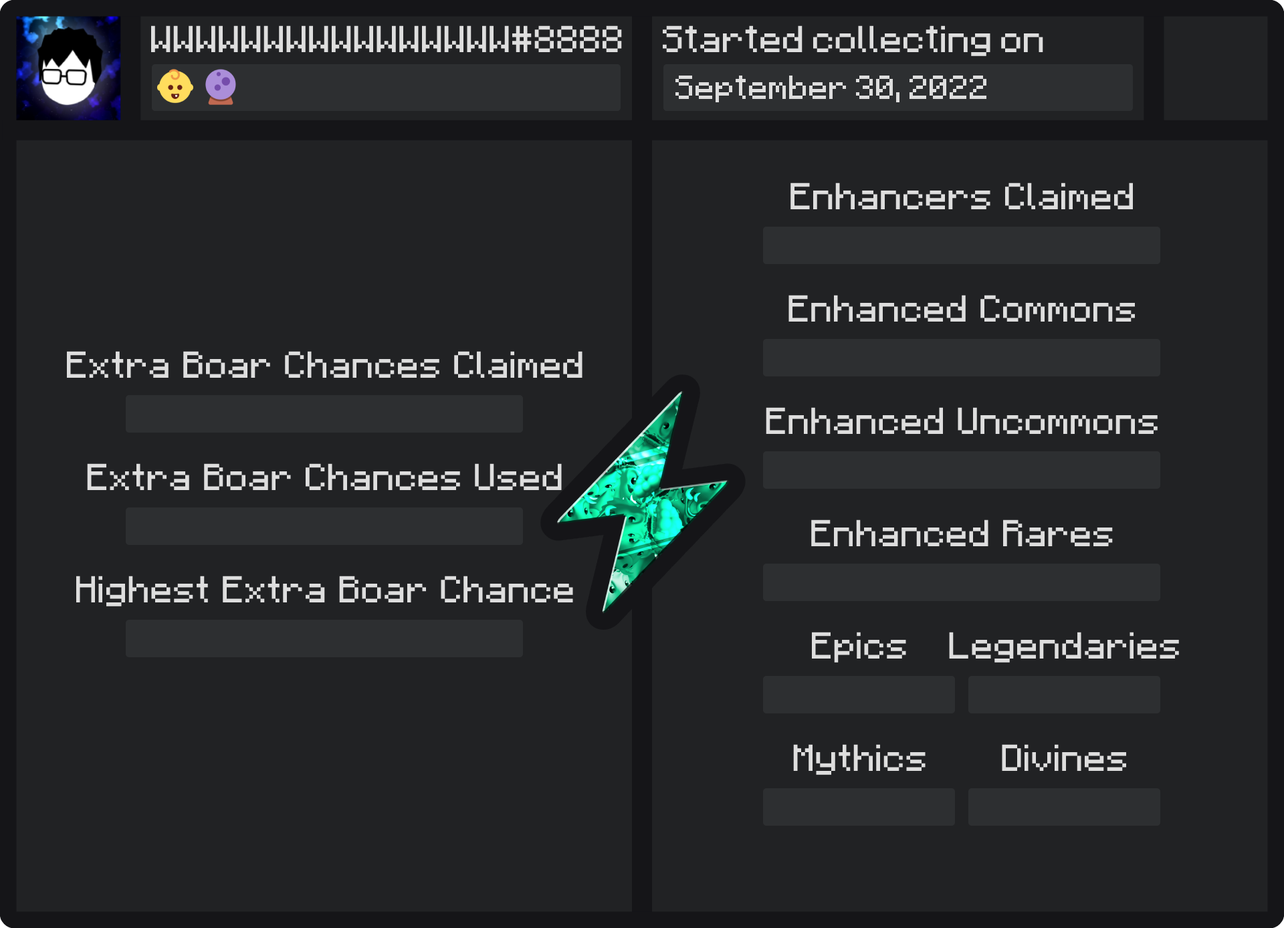
<style>
.page{position:relative;width:1284px;height:928px;background:#212224}
.page>*{position:absolute;margin:0}
.t1{font:30.1px "Minecraft";color:#dedede}
.t2{font:26.8px "Minecraft";color:#dedede}
.t3{font:30.1px "F77-Minecraft";color:#dedede}
</style>
<div class="page">
<p class="t1" style="left:151px;top:25px;width:471px;height:28px">WWWWWWWWWWWWWWWW#8888</p>
<p class="t1" style="left:663px;top:25px;width:381px;height:31px">Started collecting on</p>
<p class="t2" style="left:676px;top:76px;width:311px;height:26px">September 30, 2022</p>
<p class="t3" style="left:791px;top:183px;width:343px;height:27px">Enhancers Claimed</p>
<p class="t3" style="left:789px;top:295px;width:346px;height:27px">Enhanced Commons</p>
<p class="t3" style="left:66px;top:351px;width:517px;height:28px">Extra Boar Chances Claimed</p>
<p class="t3" style="left:766px;top:407px;width:392px;height:27px">Enhanced Uncommons</p>
<p class="t3" style="left:87px;top:464px;width:475px;height:26px">Extra Boar Chances Used</p>
<p class="t3" style="left:811px;top:520px;width:302px;height:27px">Enhanced Rares</p>
<p class="t3" style="left:76px;top:576px;width:497px;height:31px">Highest Extra Boar Chance</p>
<p class="t3" style="left:811px;top:632px;width:95px;height:31px">Epics</p>
<p class="t3" style="left:949px;top:632px;width:230px;height:31px">Legendaries</p>
<p class="t3" style="left:793px;top:745px;width:133px;height:30px">Mythics</p>
<p class="t3" style="left:1002px;top:745px;width:124px;height:26px">Divines</p>
</div>
